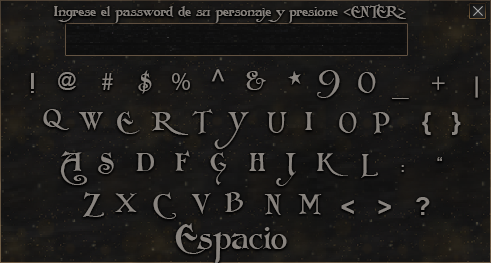
<style>
.page{position:relative;width:491px;height:263px}
.page>*{position:absolute;margin:0}
.t1{font:13.9px "Folkard";color:#88837e}
.t2{font:13.9px "MyriadPro-Regular";color:#88837e}
.t3{font:27.7px "ArialMT";color:#88837e}
.t4{font:19.2px "ArialMT";color:#88837e}
.t5{font:25.3px "MyriadPro-Regular";color:#88837e}
.t6{font:25.3px "Folkard";color:#88837e}
.t7{font:25.3px "ArialMT";color:#88837e}
.t8{font:36.5px "Folkard";color:#88837e}
.t9{font:24.8px "MyriadPro-Regular";color:#88837e}
.t10{font:24.8px "Arial-BoldMT";color:#88837e;scale:1.46 1}
.t11{font:20.3px "MyriadPro-Regular";color:#88837e;scale:1.64 1}
.t12{font:25.3px "Folkard";color:#88837e;text-transform:uppercase}
.t13{font:24.8px "Arial-BoldMT";color:#88837e}
.t14{font:12.1px "Arial-BoldMT";color:#88837e}
.t15{font:33.7px "Folkard";color:#88837e}
</style>
<div class="page">
<p class="t1" style="left:54px;top:4px;width:352px;height:19px">Ingrese el password de su personaje y presione <span class="t2">&lt;</span>ENTER<span class="t2">&gt;</span></p>
<p class="t3" style="left:31px;top:73px;width:3px;height:20px">!</p>
<p class="t4" style="left:58px;top:72px;width:18px;height:18px">@</p>
<p class="t5" style="left:102px;top:73px;width:11px;height:17px">#</p>
<p class="t6" style="left:138px;top:70px;width:14px;height:24px">$</p>
<p class="t5" style="left:172px;top:73px;width:18px;height:17px">%</p>
<p class="t7" style="left:211px;top:69px;width:13px;height:13px;rotate:90deg">&lt;</p>
<p class="t6" style="left:246px;top:71px;width:20px;height:19px">&amp;</p>
<p class="t8" style="left:288px;top:71px;width:13px;height:14px">*</p>
<p class="t6" style="left:317px;top:70px;width:23px;height:28px">9</p>
<p class="t6" style="left:358px;top:72px;width:18px;height:21px">0</p>
<p class="t9" style="left:432px;top:76px;width:13px;height:14px">+</p>
<p class="t10" style="left:475px;top:76px;width:3px;height:22px;rotate:90deg">_</p>
<p class="t11" style="left:392px;top:98px;width:17px;height:1px">_</p>
<p class="t12" style="left:43px;top:109px;width:26px;height:21px">q</p>
<p class="t12" style="left:79px;top:112px;width:24px;height:18px">w</p>
<p class="t12" style="left:117px;top:111px;width:23px;height:23px">e</p>
<p class="t12" style="left:152px;top:112px;width:36px;height:23px">r</p>
<p class="t12" style="left:192px;top:109px;width:21px;height:25px">t</p>
<p class="t12" style="left:214px;top:112px;width:35px;height:37px">y</p>
<p class="t12" style="left:267px;top:112px;width:20px;height:21px">u</p>
<p class="t12" style="left:305px;top:112px;width:7px;height:18px">i</p>
<p class="t12" style="left:339px;top:112px;width:18px;height:21px">o</p>
<p class="t12" style="left:372px;top:112px;width:18px;height:22px">p</p>
<p class="t13" style="left:422px;top:112px;width:9px;height:23px">{</p>
<p class="t13" style="left:452px;top:112px;width:9px;height:23px">}</p>
<p class="t12" style="left:175px;top:150px;width:15px;height:21px">f</p>
<p class="t12" style="left:60px;top:151px;width:27px;height:34px">a</p>
<p class="t12" style="left:98px;top:152px;width:16px;height:22px">s</p>
<p class="t12" style="left:136px;top:153px;width:18px;height:18px">d</p>
<p class="t12" style="left:210px;top:152px;width:17px;height:33px">g</p>
<p class="t12" style="left:249px;top:153px;width:16px;height:18px">h</p>
<p class="t12" style="left:276px;top:153px;width:20px;height:33px">j</p>
<p class="t12" style="left:317px;top:153px;width:31px;height:23px">k</p>
<p class="t12" style="left:361px;top:154px;width:17px;height:24px">l</p>
<p class="t14" style="left:437px;top:157px;width:5px;height:4px">“</p>
<p class="t14" style="left:401px;top:165px;width:3px;height:7px">:</p>
<p class="t12" style="left:83px;top:192px;width:21px;height:25px">z</p>
<p class="t12" style="left:115px;top:193px;width:22px;height:19px">x</p>
<p class="t12" style="left:153px;top:192px;width:23px;height:27px">c</p>
<p class="t12" style="left:191px;top:193px;width:20px;height:21px">v</p>
<p class="t12" style="left:225px;top:192px;width:18px;height:20px">b</p>
<p class="t12" style="left:264px;top:194px;width:17px;height:21px">n</p>
<p class="t12" style="left:298px;top:194px;width:24px;height:21px">m</p>
<p class="t13" style="left:416px;top:197px;width:14px;height:18px">?</p>
<p class="t13" style="left:341px;top:200px;width:13px;height:14px">&lt;</p>
<p class="t13" style="left:378px;top:200px;width:13px;height:14px">&gt;</p>
<p class="t15" style="left:175px;top:223px;width:112px;height:42px">Espacio</p>
</div>
